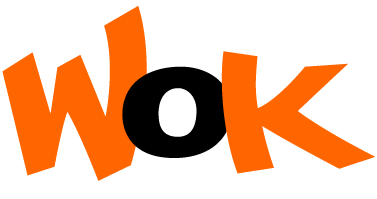
<style>
.page{position:relative;width:377px;height:199px;background:#ffffff}
.page>*{position:absolute;margin:0}
.t1{font:223.3px "PhillySans";letter-spacing:-0.05em;color:#ff6600}
.t2{font:223.3px "PhillySans";letter-spacing:-0.05em;color:#000000}
</style>
<div class="page">
<p class="t1" style="left:2px;top:6px;width:373px;height:175px">W<span class="t2">o</span>K</p>
</div>
